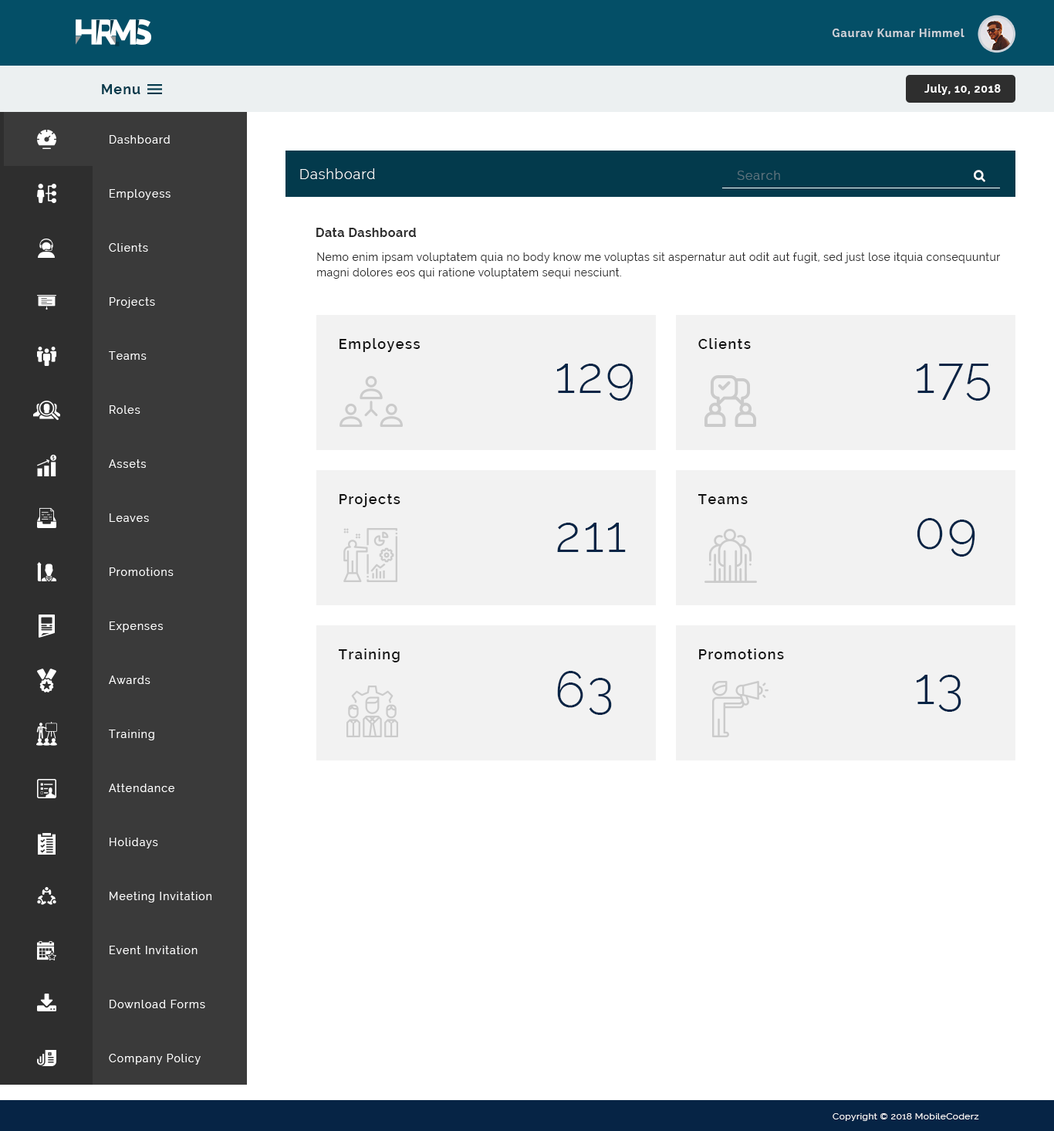
<style>
.page{position:relative;width:1054px;height:1131px;background:#ffffff}
.page>*{position:absolute;margin:0}
.t1{font:10.8px "Raleway-Bold";letter-spacing:0.08em;color:#cdd3da}
.t2{font:13.9px "Raleway-Bold";letter-spacing:0.06em;color:#033a4c}
.t3{font:10.8px "Raleway-Bold";letter-spacing:0.06em;color:#ffffff}
.t4{font:10.8px/54px "Raleway";letter-spacing:0.08em;color:#ffffff}
.t5{font:13.9px "Raleway-Light";letter-spacing:0.06em;color:#ffffff}
.t6{font:12.4px "Raleway";letter-spacing:0.06em;color:#59717c}
.t7{font:12.4px "Raleway-Bold";letter-spacing:0.035em;color:#2e2e2e}
.t8{font:10.8px/15.4px "Raleway";letter-spacing:0.035em;color:#2e2e2e}
.t9{font:14px "Raleway-SemiBold";letter-spacing:0.08em;color:#111111}
.t10{font:50.2px "Raleway-Light";letter-spacing:0.035em;color:#062445;text-transform:uppercase}
.t11{font:9.3px "Raleway";letter-spacing:0.035em;color:#ffffff}
</style>
<div class="page">
<p class="t1" style="left:832px;top:29px;width:133px;height:8px">Gaurav Kumar Himmel</p>
<p class="t2" style="left:102px;top:84px;width:38px;height:10px">Menu</p>
<p class="t3" style="left:925px;top:84px;width:76px;height:11px">July, 10, 2018</p>
<p class="t4" style="left:109px;top:135px;width:103px;height:929px">Dashboard<br>Employess<br>Clients<br>Projects<br>Teams<br>Roles<br>Assets<br>Leaves<br>Promotions<br>Expenses<br>Awards<br>Training<br>Attendance<br>Holidays<br>Meeting Invitation<br>Event Invitation<br>Download Forms<br>Company Policy</p>
<p class="t5" style="left:300px;top:168px;width:75px;height:11px">Dashboard</p>
<p class="t6" style="left:737px;top:171px;width:43px;height:9px">Search</p>
<p class="t7" style="left:316px;top:228px;width:101px;height:9px">Data Dashboard</p>
<p class="t8" style="left:317px;top:252px;width:683px;height:27px">Nemo enim ipsam voluptatem quia no body know me voluptas sit aspernatur aut odit aut fugit, sed just lose itquia consequuntur magni dolores eos qui ratione voluptatem sequi nesciunt.</p>
<p class="t9" style="left:340px;top:338px;width:80px;height:14px">Employess</p>
<p class="t9" style="left:699px;top:338px;width:52px;height:11px">Clients</p>
<p class="t10" style="left:557px;top:364px;width:77px;height:37px">129</p>
<p class="t10" style="left:917px;top:364px;width:74px;height:37px">175</p>
<p class="t9" style="left:340px;top:493px;width:61px;height:14px">Projects</p>
<p class="t9" style="left:698px;top:494px;width:50px;height:10px">Teams</p>
<p class="t10" style="left:917px;top:518px;width:59px;height:39px">09</p>
<p class="t10" style="left:557px;top:523px;width:69px;height:29px">211</p>
<p class="t9" style="left:338px;top:648px;width:62px;height:14px">Training</p>
<p class="t9" style="left:699px;top:648px;width:85px;height:11px">Promotions</p>
<p class="t10" style="left:557px;top:671px;width:55px;height:44px">63</p>
<p class="t10" style="left:917px;top:675px;width:45px;height:37px">13</p>
<p class="t11" style="left:833px;top:1113px;width:147px;height:8px">Copyright © 2018 MobileCoderz</p>
</div>
